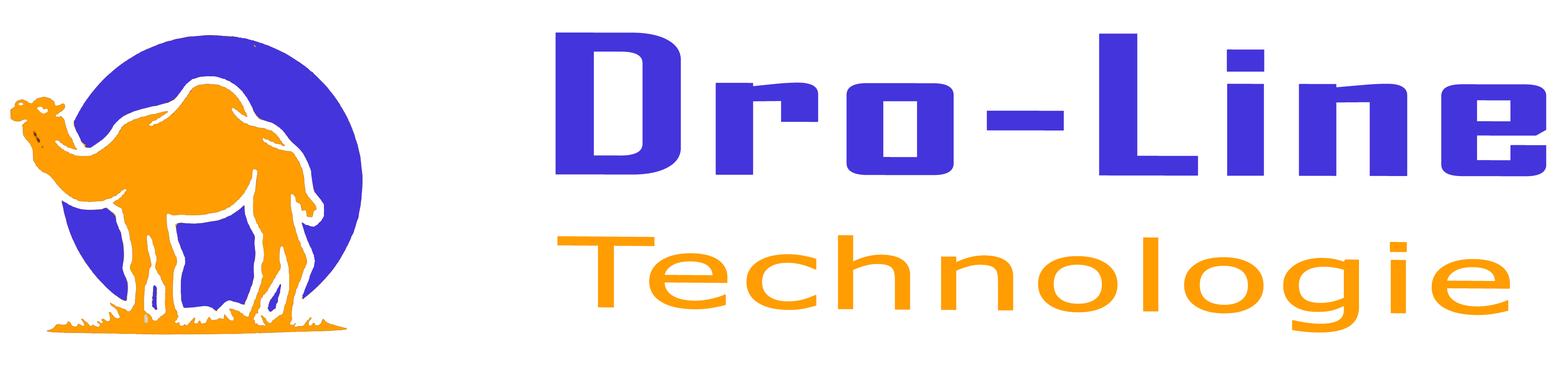
<style>
.page{position:relative;width:1568px;height:369px;background:#ffffff}
.page>*{position:absolute;margin:0}
.t1{font:184.5px "AgencyFB-Bold";color:#4434dc;font-weight:bold;scale:1.77 1}
.t2{font:96.2px "Verdana";color:#ff9d02;font-weight:bold;scale:1.62 1}
</style>
<div class="page">
<p class="t1" style="left:555px;top:33px;width:991px;height:143px">Dro-Line</p>
<p class="t2" style="left:557px;top:235px;width:953px;height:98px">Technologie</p>
</div>
